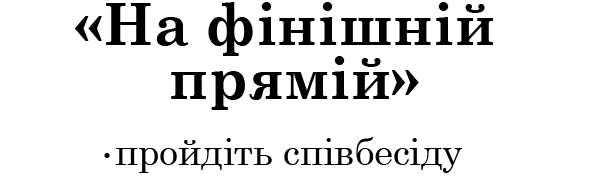
<style>
.page{position:relative;width:591px;height:185px;background:#ffffff}
.page>*{position:absolute;margin:0}
.t1{font:58.3px "CenturySchoolbook-Bold";color:#000000}
.t2{font:37.5px "CenturySchoolbook";color:#000000}
.t3{font:25px "CenturySchoolbook";color:#000000}
</style>
<div class="page">
<p class="t1" style="left:74px;top:2px;width:419px;height:54px">«На фінішній</p>
<p class="t1" style="left:171px;top:56px;width:248px;height:54px">прямій»</p>
<p class="t2" style="left:104px;top:137px;width:359px;height:36px"><span class="t3">•</span>пройдіть співбесіду</p>
</div>
